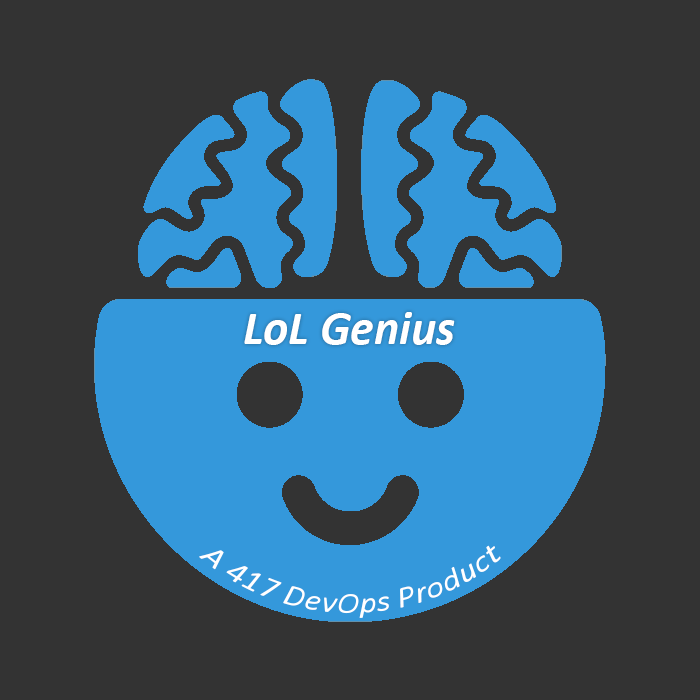
<style>
.page{position:relative;width:700px;height:700px;background:#333333}
.page>*{position:absolute;margin:0}
.t1{font:48px "Calibri-BoldItalic";color:#ffffff}
.t2{font:30px "Calibri-Italic";color:#ffffff}
</style>
<div class="page">
<p class="t1" style="left:244px;top:312px;width:211px;height:33px">LoL Genius</p>
<p class="t2" style="left:199px;top:545px;width:302px;height:73px">A 417 DevOps Product</p>
</div>
